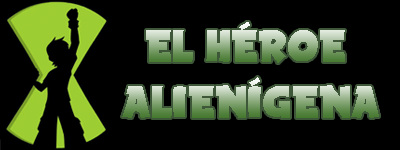
<style>
.page{position:relative;width:400px;height:150px;background:#000000}
.page>*{position:absolute;margin:0}
.t1{font:24px "SpaceComics"}
</style>
<div class="page">
<p class="t1" style="left:146px;top:22px;width:199px;height:41px">EL HÉROE</p>
<p class="t1" style="left:122px;top:77px;width:257px;height:41px">ALIENÍGENA</p>
</div>
